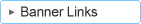
<style>
.page{position:relative;width:141px;height:24px;background:#ffffff}
.page>*{position:absolute;margin:0}
.t1{font:14px "ArialMT";letter-spacing:-0.025em;color:#333333}
</style>
<div class="page">
<p class="t1" style="left:21px;top:6px;width:77px;height:11px">Banner Links</p>
</div>
